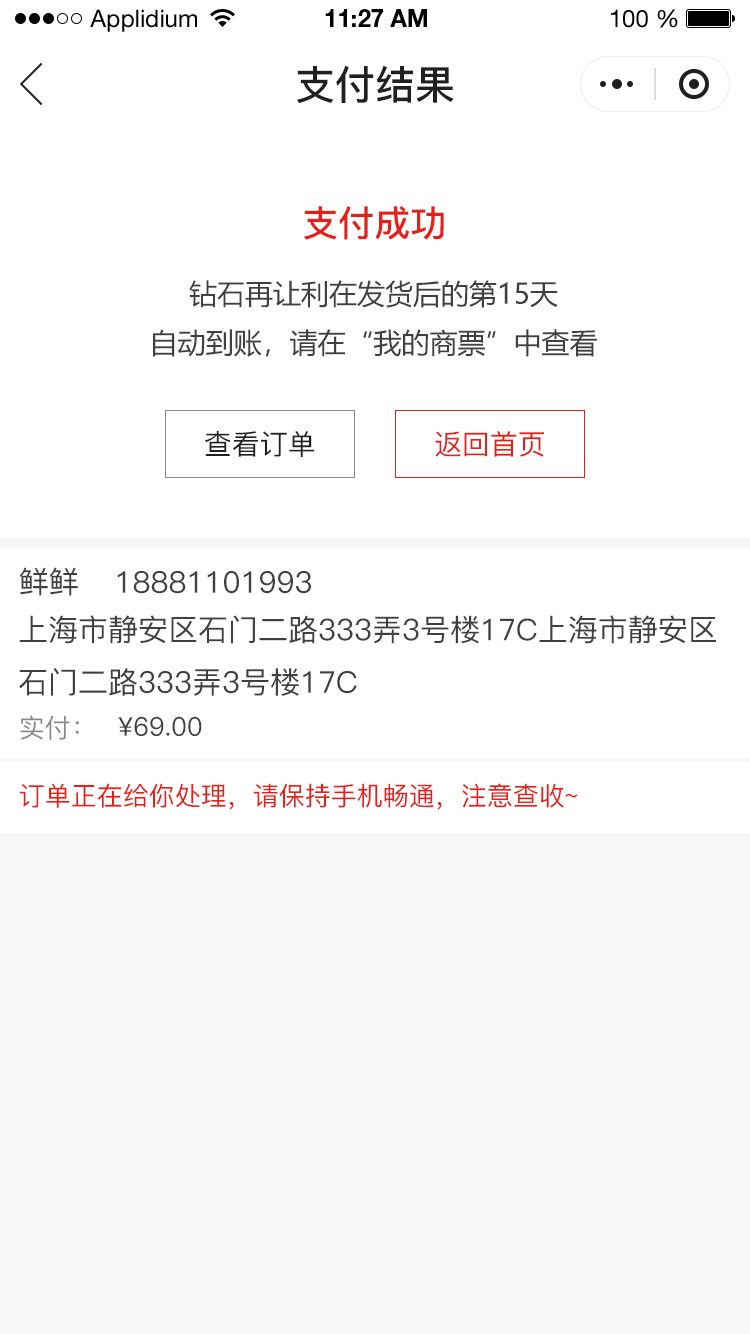
<style>
.page{position:relative;width:750px;height:1334px;background:#ffffff}
.page>*{position:absolute;margin:0}
.t1{font:24px "HelveticaNeueLTStd-Roman";color:#000000}
.t2{font:24px "HelveticaNeueLTStd-Bd";color:#000000}
.t3{font:40px "PingFang-SC-Bold";color:#202020;text-transform:uppercase}
.t4{font:36px "PingFang-SC-Bold";color:#e61f18;text-transform:uppercase}
.t5{font:28px "MicrosoftYaHei";color:#404040;text-transform:uppercase}
.t6{font:28px "PingFang-SC-Medium";color:#202020;text-transform:uppercase}
.t7{font:28px "PingFang-SC-Medium";color:#e61f18;text-transform:uppercase}
.t8{font:30px "PingFang-SC-Medium";color:#404040;text-transform:uppercase}
.t9{font:26px "PingFang-SC-Medium";color:#888888;text-transform:uppercase}
.t10{font:26px "PingFang-SC-Medium";color:#404040;text-transform:uppercase}
.t11{font:26px "PingFang-SC-Medium";color:#e61f18;text-transform:uppercase}
</style>
<div class="page">
<p class="t1" style="left:90px;top:9px;width:107px;height:23px">Applidium</p>
<p class="t2" style="left:325px;top:9px;width:102px;height:18px">11:27 AM</p>
<p class="t1" style="left:611px;top:9px;width:67px;height:19px">100 %</p>
<p class="t3" style="left:297px;top:65px;width:157px;height:38px">支付结果</p>
<p class="t4" style="left:304px;top:206px;width:140px;height:34px">支付成功</p>
<p class="t5" style="left:153px;top:280px;width:444px;height:77px;text-align:center">钻石再让利在发货后的第15天<br>自动到账，请在“我的商票”中查看</p>
<p class="t6" style="left:205px;top:431px;width:110px;height:26px">查看订单</p>
<p class="t7" style="left:435px;top:431px;width:109px;height:26px">返回首页</p>
<p class="t8" style="left:20px;top:567px;width:58px;height:29px">鲜鲜</p>
<p class="t8" style="left:117px;top:571px;width:194px;height:23px">18881101993</p>
<p class="t8" style="left:19px;top:615px;width:697px;height:81px">上海市静安区石门二路333弄3号楼17c上海市静安区<br>石门二路333弄3号楼17c</p>
<p class="t9" style="left:20px;top:715px;width:59px;height:25px">实付：</p>
<p class="t10" style="left:118px;top:716px;width:84px;height:20px">¥69.00</p>
<p class="t11" style="left:20px;top:783px;width:558px;height:27px">订单正在给你处理，请保持手机畅通，注意查收~</p>
</div>
